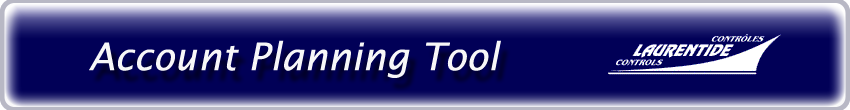
<style>
.page{position:relative;width:850px;height:110px;background:#010057}
.page>*{position:absolute;margin:0}
.t1{font:38px "LucidaSans-Italic";color:#f7f7f8}
</style>
<div class="page">
<p class="t1" style="left:89px;top:40px;width:412px;height:38px">Account Planning Tool</p>
</div>
